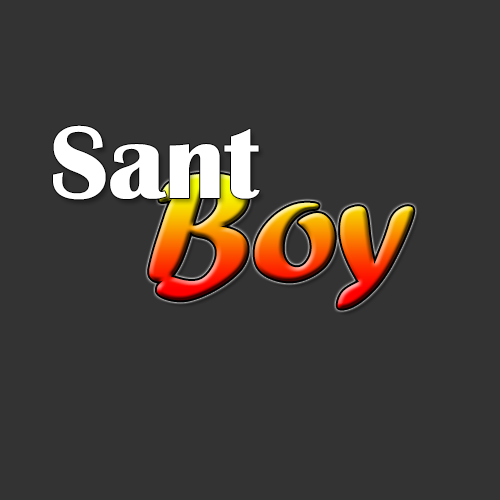
<style>
.page{position:relative;width:500px;height:500px;background:#333333}
.page>*{position:absolute;margin:0}
.t1{font:106.3px "BritannicBold";color:#ffffff}
.t2{font:159.4px "ForteMT"}
</style>
<div class="page">
<p class="t1" style="left:53px;top:125px;width:207px;height:75px">Sant</p>
<p class="t2" style="left:149px;top:173px;width:265px;height:136px">Boy</p>
</div>
